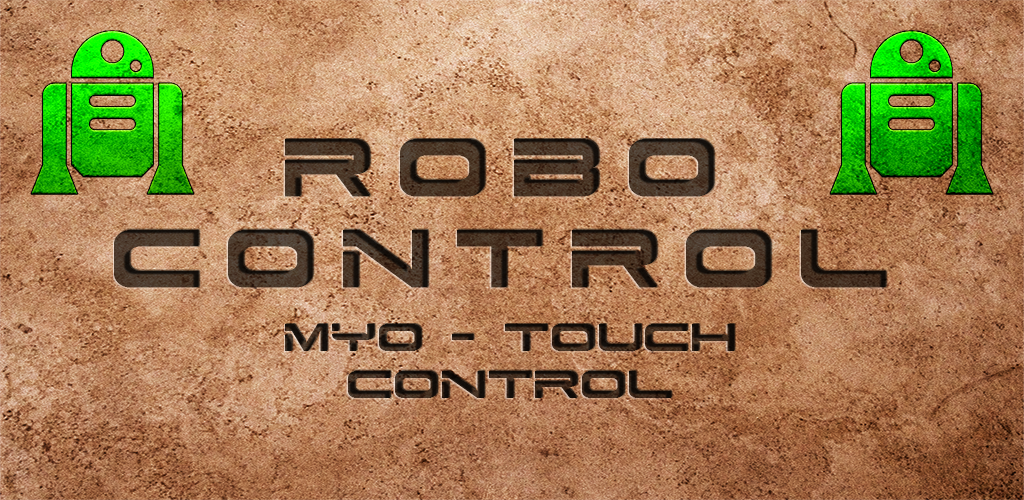
<style>
.page{position:relative;width:1024px;height:500px}
.page>*{position:absolute;margin:0}
.t1{font:96.6px "Dodger";letter-spacing:0.26em;color:#473223;text-transform:uppercase;font-weight:bold;scale:0.9 1}
.t2{font:46.4px "Dodger";font-variant:small-caps;scale:0.96 1}
</style>
<div class="page">
<p class="t1" style="left:114px;top:139px;width:772px;height:149px;text-align:center">Robo<br>Control</p>
<p class="t2" style="left:285px;top:324px;width:449px;height:74px;text-align:center">MYO - TOUCH<br>CONTROL</p>
</div>
